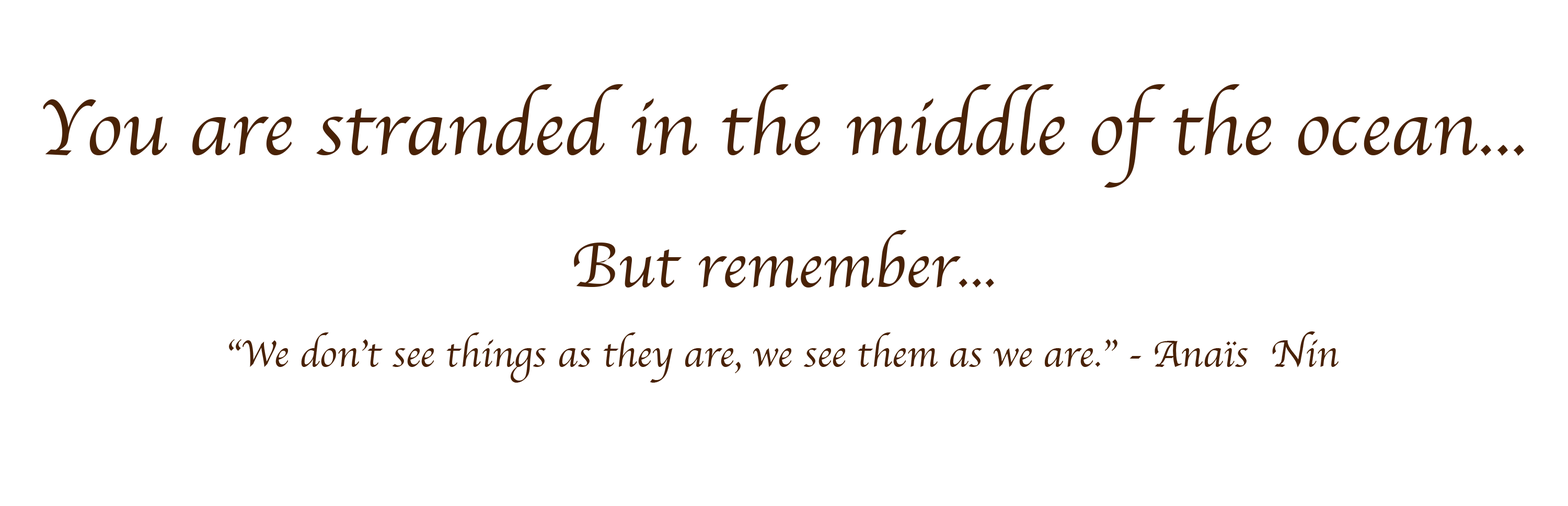
<style>
.page{position:relative;width:1568px;height:506px;background:#ffffff}
.page>*{position:absolute;margin:0}
.t1{font:80.8px "Apple-Chancery";color:#492206}
.t2{font:65.3px "Apple-Chancery";color:#492206}
.t3{font:39.2px "Apple-Chancery";color:#492206}
</style>
<div class="page">
<p class="t1" style="left:43px;top:84px;width:1481px;height:104px">You are stranded in the middle of the ocean...</p>
<p class="t2" style="left:574px;top:230px;width:420px;height:57px">But remember...</p>
<p class="t3" style="left:229px;top:331px;width:1110px;height:52px">“We don’t see things as they are, we see them as we are.” - Anaïs  Nin</p>
</div>
